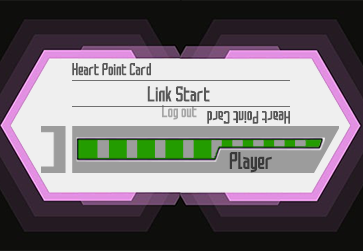
<style>
.page{position:relative;width:363px;height:251px;background:#efefef}
.page>*{position:absolute;margin:0}
.t1{font:14.9px "SAOUI-Regular";color:#575757}
.t2{font:19px "SAOUI-Regular";color:#575757}
.t3{font:14.9px "SAOUI-Regular";color:#a6a6a6}
.t4{font:15.7px "SAOUI-Regular";color:#575757}
.t5{font:20.8px "SAOUI-Regular";color:#3a3a3a}
</style>
<div class="page">
<p class="t1" style="left:72px;top:63px;width:79px;height:13px">Heart Point Card</p>
<p class="t2" style="left:147px;top:86px;width:63px;height:16px">Link Start</p>
<p class="t3" style="left:162px;top:105px;width:35px;height:15px">Log out</p>
<p class="t4" style="left:207px;top:111px;width:83px;height:13px;rotate:180deg">Heart Point Card</p>
<p class="t5" style="left:229px;top:152px;width:43px;height:21px">Player</p>
</div>
